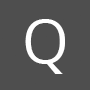
<style>
.page{position:relative;width:90px;height:90px;background:#4e4e4e}
.page>*{position:absolute;margin:0}
.t1{font:60px "OpenSans";color:#ffffff}
</style>
<div class="page">
<p class="t1" style="left:25px;top:19px;width:40px;height:55px">Q</p>
</div>
